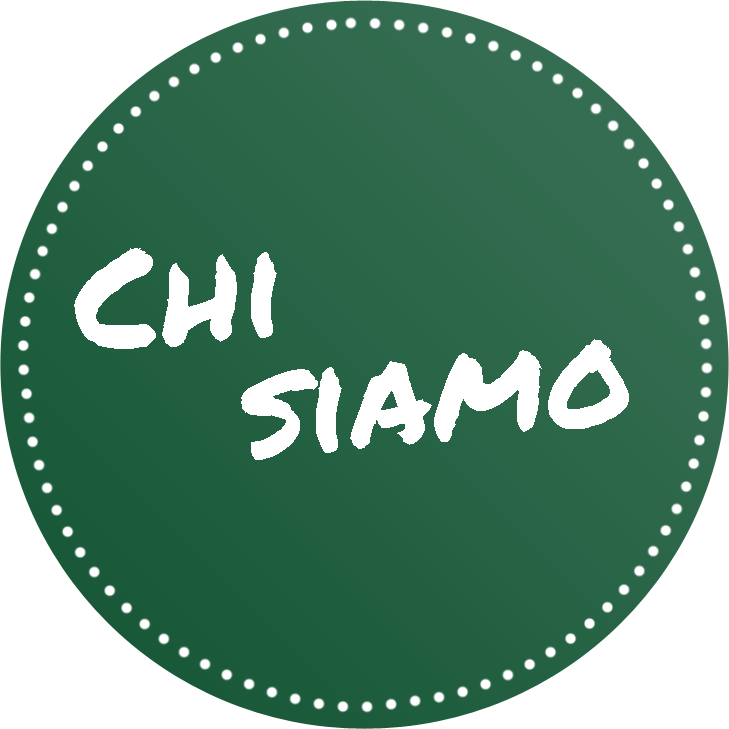
<style>
.page{position:relative;width:729px;height:729px;background:#ffffff}
.page>*{position:absolute;margin:0}
.t1{font:140px/120px "PermanentMarker";color:#ffffff}
.t2{font:140px/36px "PermanentMarker";color:#ffffff}
</style>
<div class="page">
<p class="t1" style="left:74px;top:248px;width:555px;height:212px;rotate:-5deg"><span class="t2">Chi<br></span>   siamo</p>
</div>
